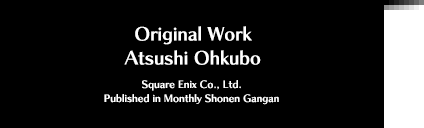
<style>
.page{position:relative;width:424px;height:128px;background:#000000}
.page>*{position:absolute;margin:0}
.t1{font:18px/24px "ChiaroStd-B";color:#ffffff}
.t2{font:10px/12px "ChiaroStd-B";color:#fefefe}
.t3{font:10px/14px "ChiaroStd-B";color:#fefefe}
</style>
<div class="page">
<p class="t1" style="left:124px;top:26px;width:137px;height:39px;text-align:center">Original Work<br>Atsushi Ohkubo</p>
<p class="t2" style="left:104px;top:80px;width:175px;height:25px;text-align:center"><span class="t3">Square Enix Co., Ltd.<br>Pub</span>lished in Monthly Shonen Gangan</p>
</div>
